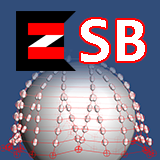
<style>
.page{position:relative;width:160px;height:160px;background:#314d79}
.page>*{position:absolute;margin:0}
.t1{font:64px "Consolas-Bold";color:#ffffff}
</style>
<div class="page">
<p class="t1" style="left:81px;top:19px;width:64px;height:43px">SB</p>
</div>
